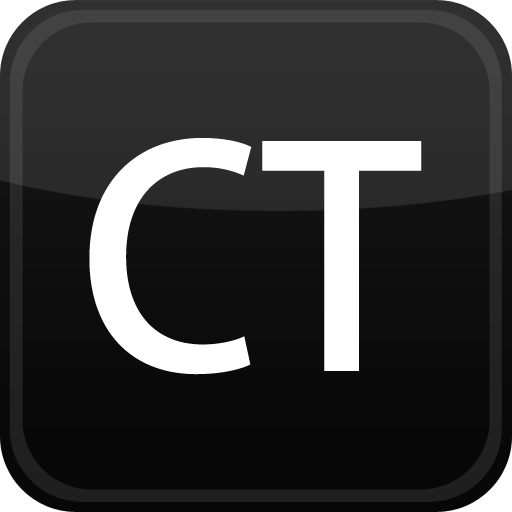
<style>
.page{position:relative;width:512px;height:512px}
.page>*{position:absolute;margin:0}
.t1{font:300px "AdobeHeitiStd-Regular";color:#ffffff}
</style>
<div class="page">
<p class="t1" style="left:89px;top:138px;width:333px;height:237px">CT</p>
</div>
